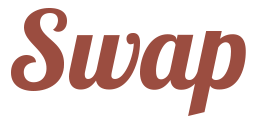
<style>
.page{position:relative;width:258px;height:124px;background:#ffffff}
.page>*{position:absolute;margin:0}
.t1{font:108px "Lobster1.4";color:#9b4d40}
</style>
<div class="page">
<p class="t1" style="left:11px;top:8px;width:235px;height:108px">Swap</p>
</div>
